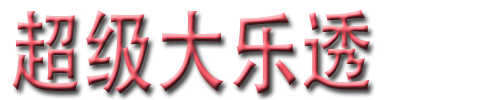
<style>
.page{position:relative;width:500px;height:100px;background:#ffffff}
.page>*{position:absolute;margin:0}
.t1{font:92px "AdobeHeitiStd-Regular";scale:0.79 1}
</style>
<div class="page">
<p class="t1" style="left:12px;top:9px;width:359px;height:85px">超级大乐透</p>
</div>
